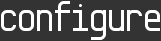
<style>
.page{position:relative;width:161px;height:41px;background:#333333}
.page>*{position:absolute;margin:0}
.t1{font:48px "Monkey";color:#ffffff}
</style>
<div class="page">
<p class="t1" style="left:1px;top:1px;width:159px;height:39px">configure</p>
</div>
